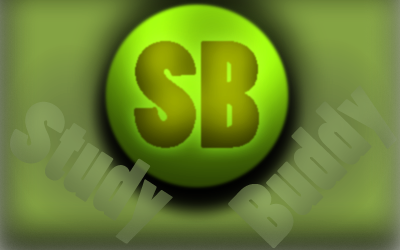
<style>
.page{position:relative;width:400px;height:250px}
.page>*{position:absolute;margin:0}
.t1{font:85.6px "PoplarStd";letter-spacing:0.007em;color:#7b9053;scale:1.1 1}
.t2{font:85.6px "PoplarStd";letter-spacing:0.007em;color:#778c4f;scale:1.1 1}
</style>
<div class="page">
<p class="t1" style="left:228px;top:85px;width:169px;height:163px;rotate:-46deg">Buddy</p>
<p class="t2" style="left:10px;top:101px;width:163px;height:143px;rotate:33deg">Study</p>
</div>
